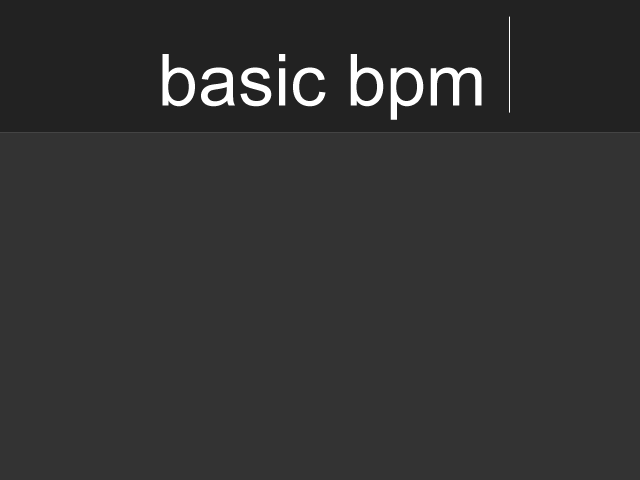
<style>
.page{position:relative;width:640px;height:480px;background:#333333}
.page>*{position:absolute;margin:0}
.t1{font:72px "ArialMT";color:#ffffff}
</style>
<div class="page">
<p class="t1" style="left:162px;top:54px;width:320px;height:66px">basic bpm</p>
</div>
